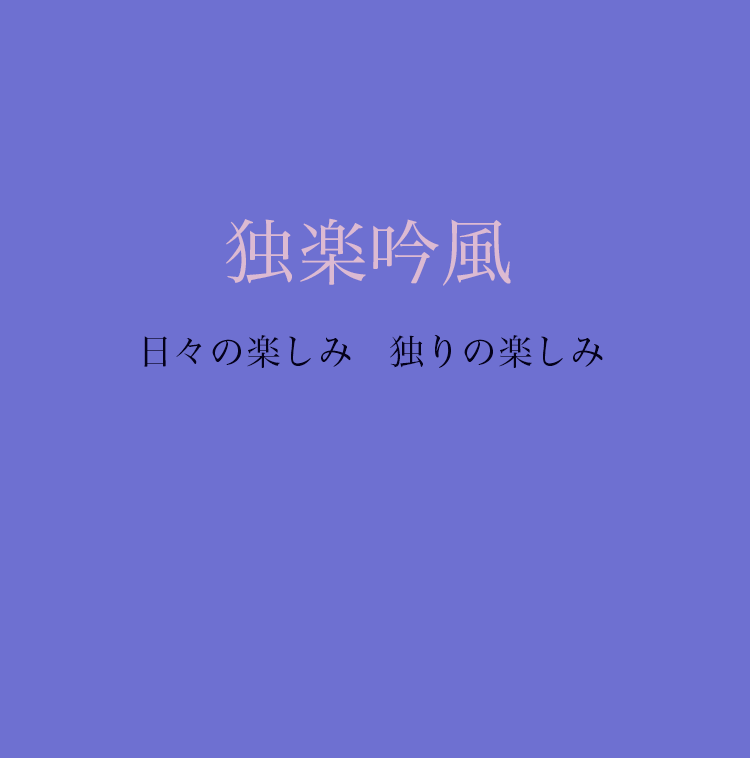
<style>
.page{position:relative;width:750px;height:758px;background:#6e70d1}
.page>*{position:absolute;margin:0}
.t1{font:72px "HiraMinPro-W3";color:#dcbad2}
.t2{font:36px "HiraMinPro-W3";color:#04011a}
</style>
<div class="page">
<p class="t1" style="left:226px;top:218px;width:285px;height:68px">独楽吟風</p>
<p class="t2" style="left:144px;top:334px;width:459px;height:34px">日々の楽しみ　独りの楽しみ</p>
</div>
